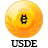
<style>
.page{position:relative;width:48px;height:48px;background:#ffffff}
.page>*{position:absolute;margin:0}
.t1{font:9.6px "Georgia";color:#000000}
</style>
<div class="page">
<p class="t1" style="left:11px;top:40px;width:27px;height:7px">USDE</p>
</div>
